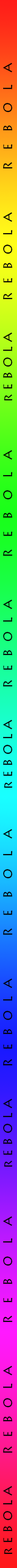
<style>
.page{position:relative;width:17px;height:1568px}
.page>*{position:absolute;margin:0}
.t1{font:12.5px "LithosPro-Regular";color:#030303}
</style>
<div class="page">
<p class="t1" style="left:3px;top:63px;width:9px;height:236px;rotate:-90deg">R  E  B  O  L  A           R   E   B   O   L   A</p>
<p class="t1" style="left:3px;top:332px;width:9px;height:68px;rotate:-90deg">r E B O L A</p>
<p class="t1" style="left:3px;top:450px;width:9px;height:237px;rotate:-90deg">R  E  B  O  L  A           R   E   B   O   L   A</p>
<p class="t1" style="left:3px;top:720px;width:9px;height:68px;rotate:-90deg">r E B O L A</p>
<p class="t1" style="left:3px;top:829px;width:9px;height:237px;rotate:-90deg">R  E  B  O  L  A           R   E   B   O   L   A</p>
<p class="t1" style="left:3px;top:1099px;width:9px;height:68px;rotate:-90deg">r E B O L A</p>
<p class="t1" style="left:3px;top:1216px;width:9px;height:237px;rotate:-90deg">R  E  B  O  L  A           R   E   B   O   L   A</p>
<p class="t1" style="left:3px;top:1486px;width:9px;height:68px;rotate:-90deg">r E B O L A</p>
</div>
